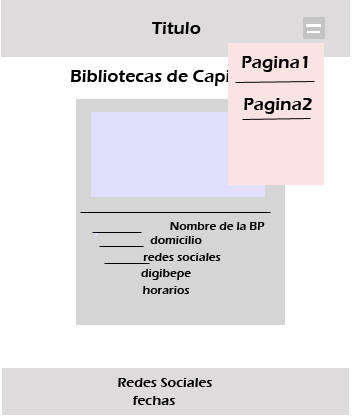
<style>
.page{position:relative;width:352px;height:416px;background:#ffffff}
.page>*{position:absolute;margin:0}
.t1{font:18px "ErasITC-Demi";color:#000000}
.t2{font:12px "ErasITC-Demi";color:#000000}
.t3{font:14px "ErasITC-Demi";color:#000000}
</style>
<div class="page">
<p class="t1" style="left:152px;top:22px;width:49px;height:12px">Titulo</p>
<p class="t1" style="left:242px;top:56px;width:66px;height:16px">Pagina1</p>
<p class="t1" style="left:71px;top:70px;width:181px;height:16px">Bibliotecas de Capital</p>
<p class="t1" style="left:244px;top:98px;width:68px;height:16px">Pagina2</p>
<p class="t2" style="left:170px;top:222px;width:95px;height:8px">Nombre de la BP</p>
<p class="t2" style="left:150px;top:236px;width:52px;height:8px">domicilio</p>
<p class="t2" style="left:143px;top:253px;width:78px;height:8px">redes sociales</p>
<p class="t2" style="left:141px;top:269px;width:50px;height:11px">digibepe</p>
<p class="t2" style="left:143px;top:286px;width:47px;height:8px">horarios</p>
<p class="t3" style="left:118px;top:378px;width:94px;height:9px">Redes Sociales</p>
<p class="t3" style="left:133px;top:396px;width:42px;height:9px">fechas</p>
</div>
